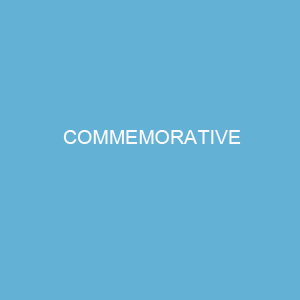
<style>
.page{position:relative;width:300px;height:300px;background:#63b2d6}
.page>*{position:absolute;margin:0}
.t1{font:30px "CordiaUPC-Bold";color:#faf9fc}
</style>
<div class="page">
<p class="t1" style="left:63px;top:130px;width:178px;height:14px">COMMEMORATIVE</p>
</div>
